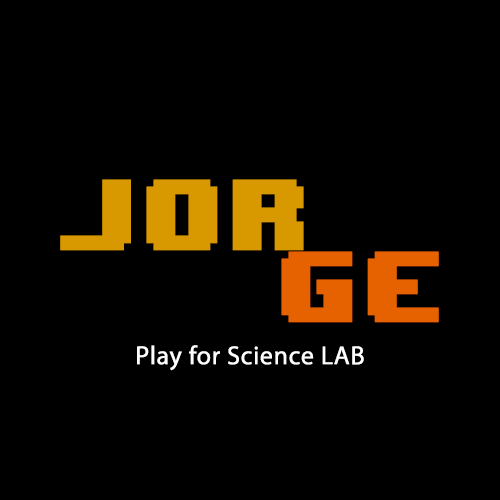
<style>
.page{position:relative;width:500px;height:500px;background:#000000}
.page>*{position:absolute;margin:0}
.t1{font:84px/24px "8BITWONDERNominal";color:#d89800;font-weight:bold}
.t2{font:84px/24px "8BITWONDERNominal";color:#e66100;font-weight:bold}
.t3{font:26px "MyriadPro-Regular";color:#ffffff;font-weight:bold}
</style>
<div class="page">
<p class="t1" style="left:60px;top:179px;width:379px;height:144px">JOR<br>     <br>     <br>    <span class="t2"> GE</span></p>
<p class="t3" style="left:137px;top:345px;width:227px;height:26px">Play for Science LAB</p>
</div>
